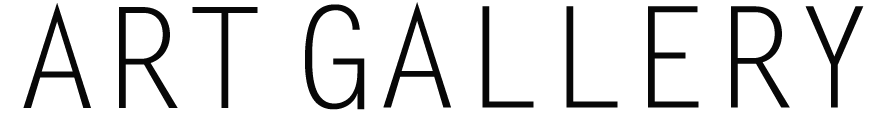
<style>
.page{position:relative;width:879px;height:113px;background:#ffffff}
.page>*{position:absolute;margin:0}
.t1{font:140px "LetterGothicStd";color:#070707}
</style>
<div class="page">
<p class="t1" style="left:23px;top:3px;width:235px;height:105px">ART</p>
<p class="t1" style="left:305px;top:2px;width:559px;height:108px">GALLERY</p>
</div>
